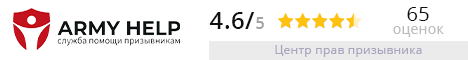
<style>
.page{position:relative;width:468px;height:60px;background:#ffffff}
.page>*{position:absolute;margin:0}
.t1{font:24px "OpenSans-SemiBold";letter-spacing:0.02em;color:#111111}
.t2{font:16px "OpenSans-SemiBold";letter-spacing:0.02em;color:#a3a3a3}
.t3{font:20px "OpenSans-Regular";letter-spacing:0.02em;color:#0e0e0e}
.t4{font:14px "OpenSans-Regular";letter-spacing:0.02em;color:#bcbcbc}
.t5{font:12px "OpenSans-Regular";letter-spacing:0.02em;color:#a8a6bf}
</style>
<div class="page">
<p class="t1" style="left:209px;top:12px;width:46px;height:17px">4.6/</p>
<p class="t2" style="left:256px;top:17px;width:8px;height:12px">5</p>
<p class="t3" style="left:407px;top:7px;width:22px;height:14px">65</p>
<p class="t4" style="left:393px;top:26px;width:51px;height:11px">оценок</p>
<p class="t5" style="left:275px;top:45px;width:147px;height:12px">Центр прав призывника</p>
</div>
